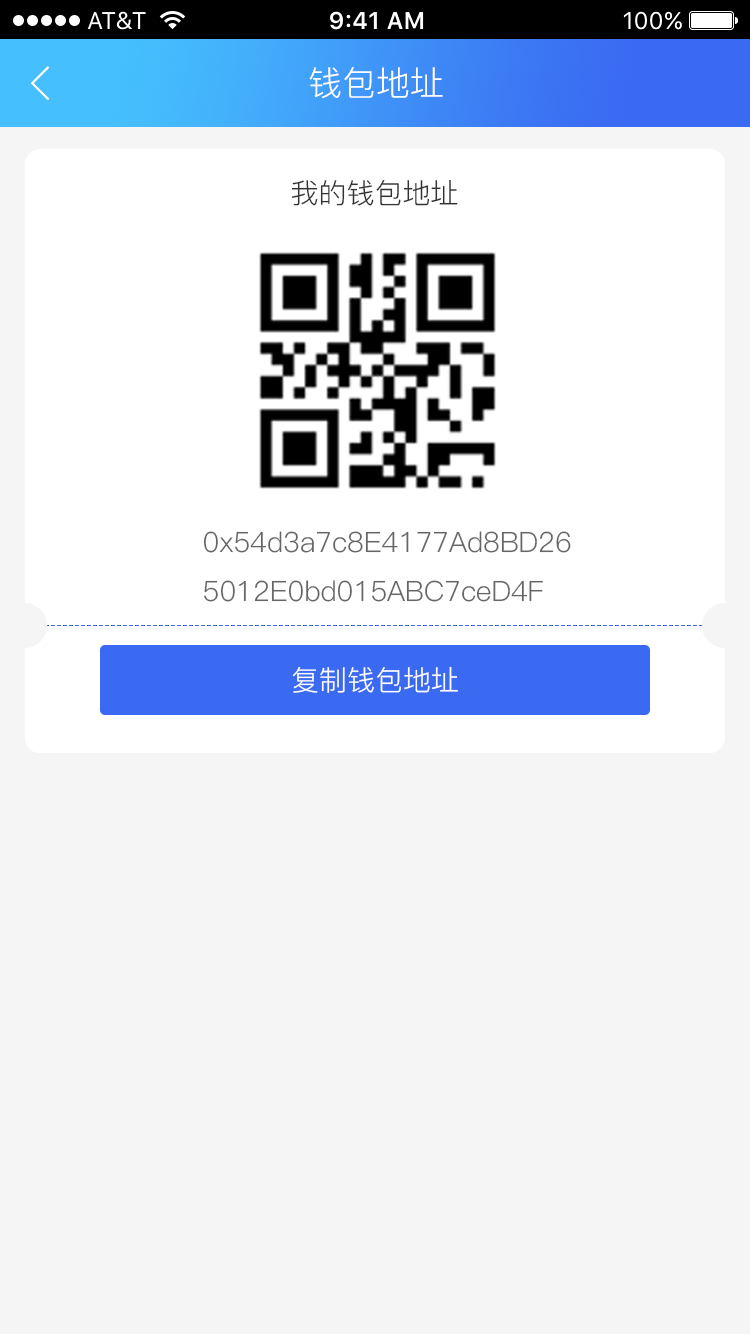
<style>
.page{position:relative;width:750px;height:1334px;background:#f5f5f5}
.page>*{position:absolute;margin:0}
.t1{font:34px "PingFang-SC-Regular";color:#ffffff}
.t2{font:28px "PingFang-SC-Regular";color:#333333}
.t3{font:28px "PingFang-SC-Regular";color:#666666}
.t4{font:28px "PingFang-SC-Regular";color:#ffffff}
</style>
<div class="page">
<p class="t1" style="left:309px;top:67px;width:134px;height:32px">钱包地址</p>
<p class="t2" style="left:291px;top:180px;width:167px;height:26px">我的钱包地址</p>
<p class="t3" style="left:203px;top:531px;width:368px;height:71px">0x54d3a7c8E4177Ad8BD26<br>5012E0bd015ABC7ceD4F</p>
<p class="t4" style="left:292px;top:666px;width:166px;height:27px">复制钱包地址</p>
</div>
